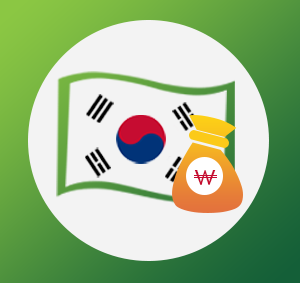
<style>
.page{position:relative;width:300px;height:283px;background:#f3f3f3}
.page>*{position:absolute;margin:0}
.t1{font:28.1px "ArialMT";color:#c60c31}
</style>
<div class="page">
<p class="t1" style="left:194px;top:170px;width:22px;height:15px">w</p>
</div>
